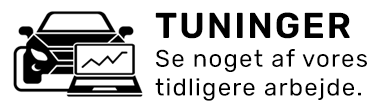
<style>
.page{position:relative;width:374px;height:108px;background:#ffffff}
.page>*{position:absolute;margin:0}
.t1{font:24px "Rubik-Regular";letter-spacing:0.05em;color:#000000}
.t2{font:36px "Rubik-SemiBold";letter-spacing:0.05em;color:#000000}
</style>
<div class="page">
<p class="t1" style="left:155px;top:12px;width:212px;height:89px"><span class="t2">TUNINGER<br></span>Se noget af vores<br>tidligere arbejde.</p>
</div>
